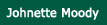
<style>
.page{position:relative;width:107px;height:25px;background:#005941}
.page>*{position:absolute;margin:0}
.t1{font:12px "Tahoma";letter-spacing:0.02em;color:#ffffff;font-weight:bold}
</style>
<div class="page">
<p class="t1" style="left:6px;top:7px;width:93px;height:13px">Johnette Moody</p>
</div>
